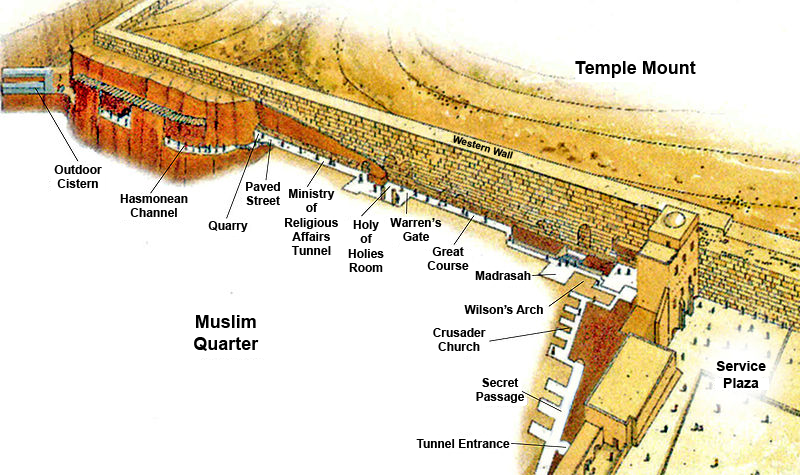
<style>
.page{position:relative;width:800px;height:475px;background:#ffffff}
.page>*{position:absolute;margin:0}
.t1{font:18px "Arial-BoldMT";color:#000000}
.t2{font:10px "Arial-BoldMT";color:#000000}
.t3{font:12px "Arial-BoldMT";color:#000000}
.t4{font:14px "Arial-BoldMT";color:#000000}
</style>
<div class="page">
<p class="t1" style="left:575px;top:61px;width:121px;height:17px">Temple Mount</p>
<p class="t2" style="left:453px;top:135px;width:60px;height:24px;rotate:17deg">Western Wall</p>
<p class="t3" style="left:54px;top:165px;width:48px;height:23px;text-align:center">Outdoor<br>Cistern</p>
<p class="t3" style="left:246px;top:182px;width:34px;height:23px;text-align:center">Paved<br>Street</p>
<p class="t3" style="left:120px;top:194px;width:68px;height:23px;text-align:center">Hasmonean<br>Channel</p>
<p class="t3" style="left:285px;top:189px;width:53px;height:66px;text-align:center">Ministry<br>of<br>Religious<br>Affairs<br>Tunnel</p>
<p class="t3" style="left:208px;top:221px;width:40px;height:11px">Quarry</p>
<p class="t3" style="left:348px;top:220px;width:36px;height:52px;text-align:center">Holy<br>of<br>Holies<br>Room</p>
<p class="t3" style="left:390px;top:218px;width:52px;height:23px;text-align:center">Warren’s<br>Gate</p>
<p class="t3" style="left:427px;top:247px;width:42px;height:23px;text-align:center">Great<br>Course</p>
<p class="t3" style="left:475px;top:271px;width:56px;height:9px">Madrasah</p>
<p class="t3" style="left:464px;top:305px;width:79px;height:9px">Wilson’s Arch</p>
<p class="t1" style="left:194px;top:315px;width:65px;height:36px;text-align:center">Muslim<br>Quarter</p>
<p class="t3" style="left:433px;top:328px;width:53px;height:23px;text-align:center">Crusader<br>Church</p>
<p class="t4" style="left:716px;top:361px;width:50px;height:27px;text-align:center">Service<br>Plaza</p>
<p class="t3" style="left:476px;top:378px;width:49px;height:25px;text-align:center">Secret<br>Passage</p>
<p class="t3" style="left:416px;top:439px;width:94px;height:9px">Tunnel Entrance</p>
</div>
